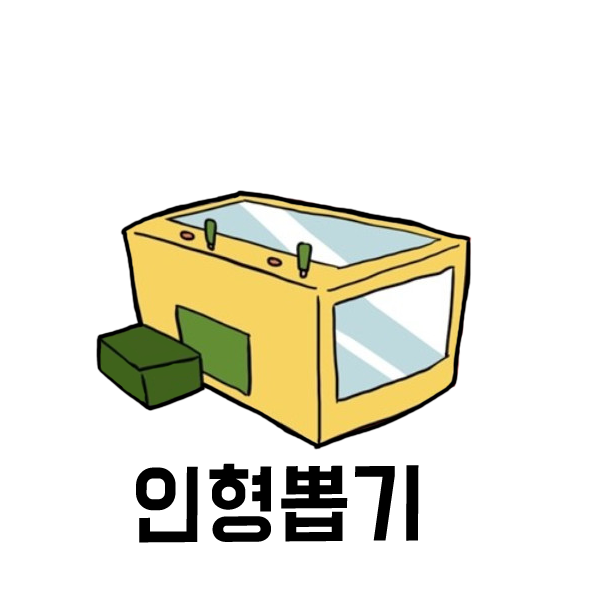
<style>
.page{position:relative;width:600px;height:600px;background:#ffffff}
.page>*{position:absolute;margin:0}
.t1{font:79.6px "BMDoHyeon";color:#000000;scale:0.96 1}
</style>
<div class="page">
<p class="t1" style="left:136px;top:463px;width:283px;height:80px">인형뽑기</p>
</div>
